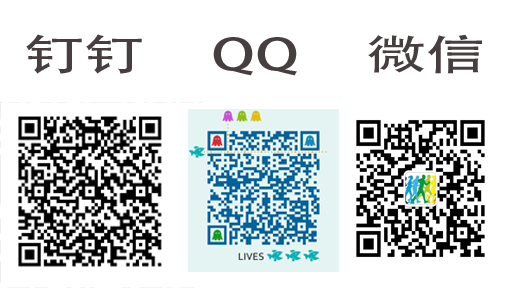
<style>
.page{position:relative;width:505px;height:288px;background:#ffffff}
.page>*{position:absolute;margin:0}
.t1{font:41.9px "AdobeHeitiStd-Regular";color:#473f3f;scale:1.43 1}
</style>
<div class="page">
<p class="t1" style="left:26px;top:34px;width:456px;height:42px">钉钉     QQ     微信</p>
</div>
